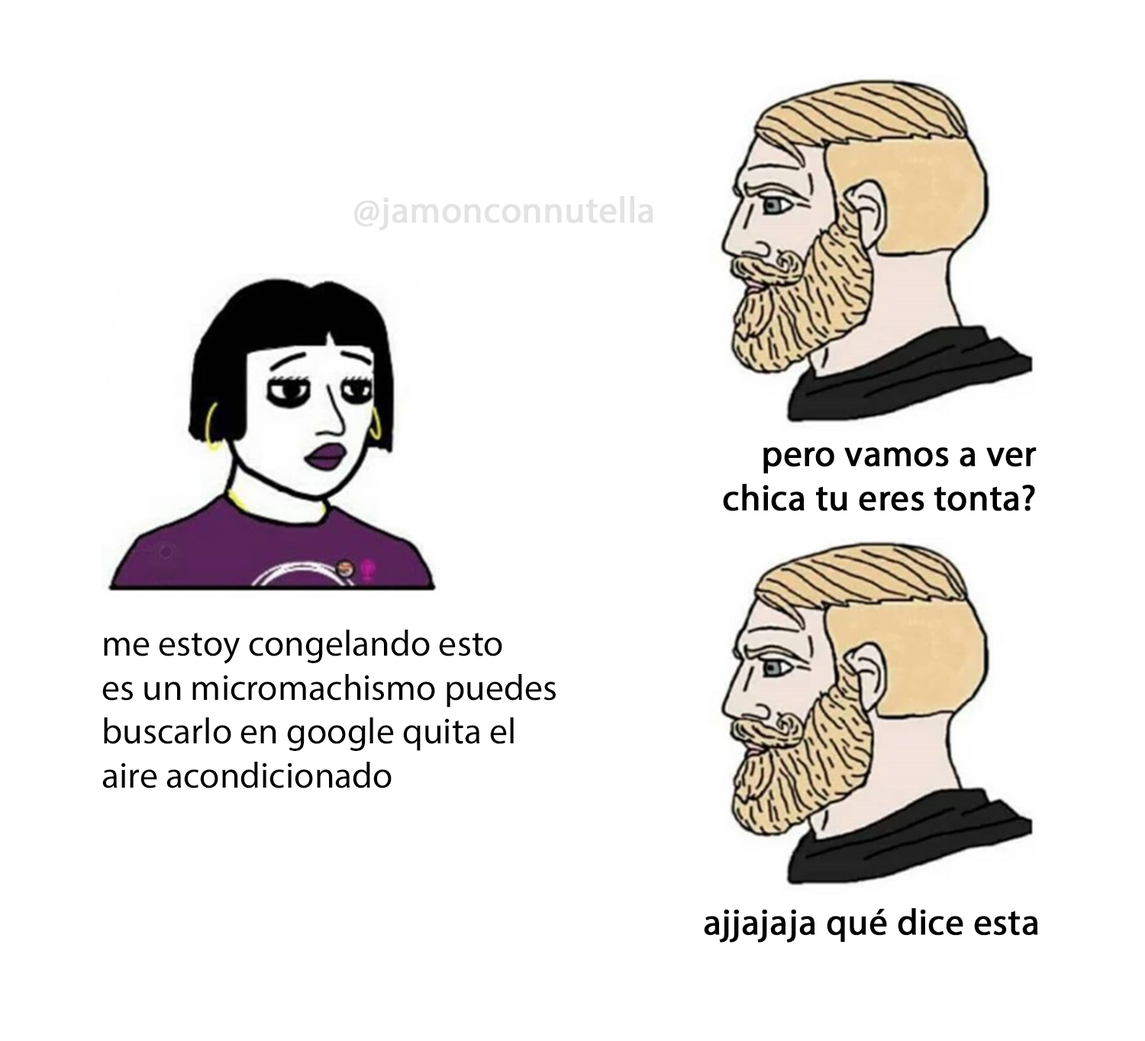
<style>
.page{position:relative;width:1145px;height:1041px;background:#ffffff}
.page>*{position:absolute;margin:0}
.t1{font:36.6px "MyriadPro-Regular";color:#e3e3e3;font-weight:bold}
.t2{font:36.6px "MyriadPro-Regular";color:#000000}
.t3{font:36.6px "MyriadPro-Regular";color:#000000;font-weight:bold}
</style>
<div class="page">
<p class="t1" style="left:354px;top:196px;width:299px;height:35px">@jamonconnutella</p>
<p class="t2" style="left:102px;top:630px;width:454px;height:159px">me estoy congelando esto<br>es un micromachismo puedes<br>buscarlo en google quita el <br>aire acondicionado</p>
<p class="t3" style="left:704px;top:908px;width:334px;height:35px">ajjajaja qué dice esta</p>
</div>
